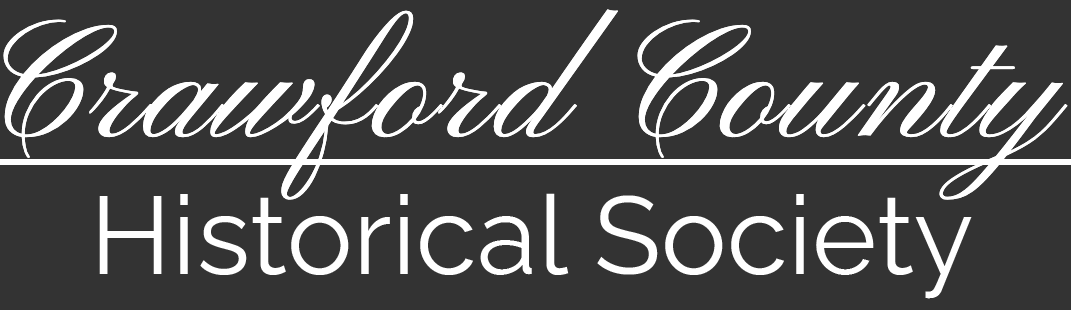
<style>
.page{position:relative;width:1071px;height:310px;background:#333333}
.page>*{position:absolute;margin:0}
.t1{font:163px "PinyonScript-Regular";letter-spacing:0.025em;color:#ffffff}
.t2{font:110px "RalewayRoman-Regular";letter-spacing:0.005em;color:#ffffff}
</style>
<div class="page">
<p class="t1" style="left:3px;top:9px;width:1065px;height:191px">Crawford County</p>
<p class="t2" style="left:99px;top:193px;width:873px;height:106px">Historical Society</p>
</div>
